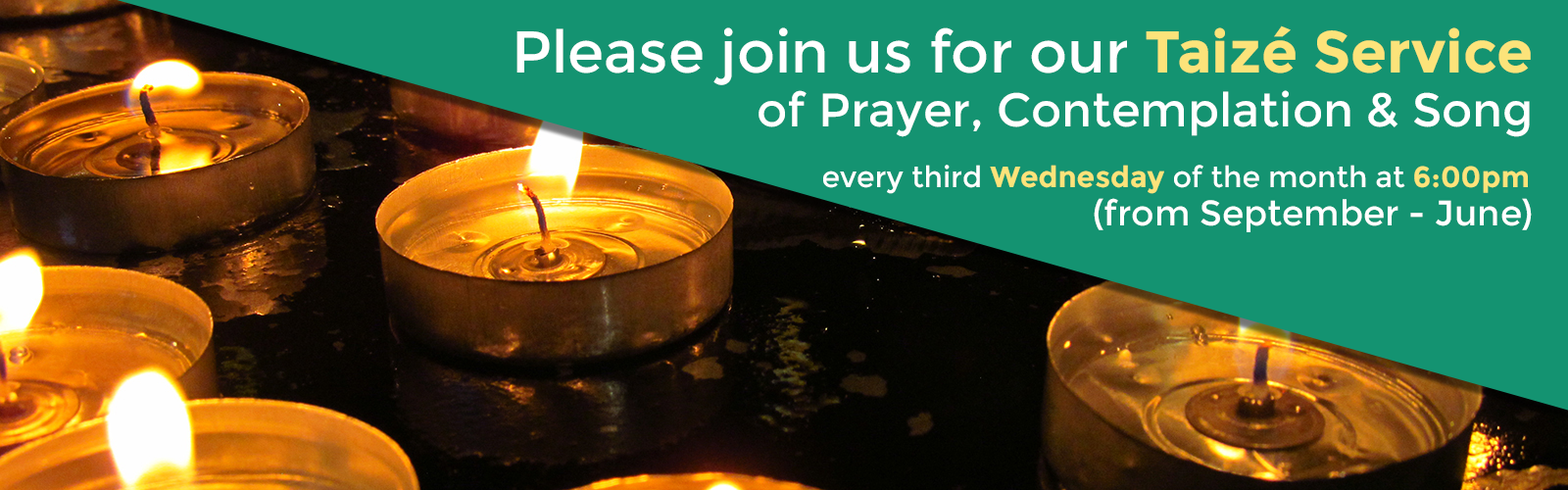
<style>
.page{position:relative;width:1568px;height:490px;background:#149371}
.page>*{position:absolute;margin:0}
.t1{font:58.8px "Montserrat-Regular";color:#ffffff}
.t2{font:58.8px "Montserrat-Bold";color:#fce37a}
.t3{font:47px "Montserrat-Regular";color:#ffffff}
.t4{font:29.4px "Montserrat-Regular";color:#ffffff}
.t5{font:29.4px "Montserrat-Bold";color:#fce37a}
.t6{font:35.3px "Montserrat-Regular";color:#ffffff}
</style>
<div class="page">
<p class="t1" style="left:516px;top:25px;width:1015px;height:60px">Please join us for our <span class="t2">Taizé Service</span></p>
<p class="t3" style="left:759px;top:90px;width:771px;height:47px">of Prayer, Contemplation &amp; Song</p>
<p class="t4" style="left:823px;top:165px;width:705px;height:29px">every third <span class="t5">Wednesday</span> of the month at <span class="t5">6:00pm</span></p>
<p class="t6" style="left:1094px;top:198px;width:438px;height:34px">(from September - June)</p>
</div>
